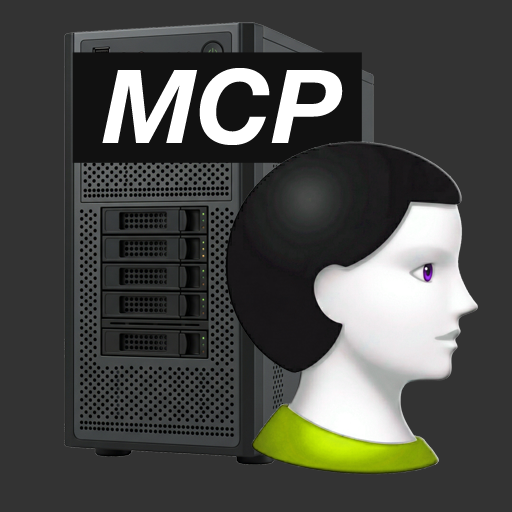
<style>
.page{position:relative;width:512px;height:512px;background:#333333}
.page>*{position:absolute;margin:0}
.t1{font:102.7px "HelveticaNeueLTStd-BdIt";color:#ffffff}
</style>
<div class="page">
<p class="t1" style="left:102px;top:68px;width:241px;height:77px">MCP</p>
</div>
